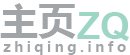
<style>
.page{position:relative;width:130px;height:55px;background:#ffffff}
.page>*{position:absolute;margin:0}
.t1{font:38px "MicrosoftYaHei-Bold";color:#a1a5a8}
.t2{font:38px "Arial-BoldMT";color:#9dd6c5}
.t3{font:14px "MicrosoftYaHei-Bold";color:#a1a5a8}
</style>
<div class="page">
<p class="t1" style="left:0px;top:3px;width:76px;height:36px">主页</p>
<p class="t2" style="left:77px;top:12px;width:52px;height:29px">ZQ</p>
<p class="t3" style="left:3px;top:41px;width:123px;height:14px">zhiqing.info</p>
</div>
